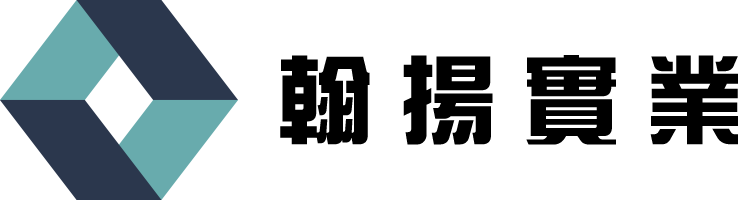
<style>
.page{position:relative;width:738px;height:200px;background:#ffffff}
.page>*{position:absolute;margin:0}
.t1{font:93.3px "SingYi-Ultra";letter-spacing:0.32em;color:#000000}
</style>
<div class="page">
<p class="t1" style="left:280px;top:55px;width:459px;height:90px">翰揚實業</p>
</div>
